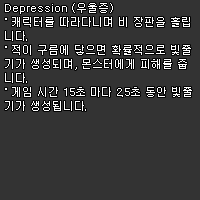
<style>
.page{position:relative;width:200px;height:200px;background:#333333}
.page>*{position:absolute;margin:0}
.t1{font:11px/14px "Dotum";color:#ffffff}
</style>
<div class="page">
<p class="t1" style="left:5px;top:3px;width:187px;height:108px">Depression (우울증)<br>˚ 캐릭터를 따라다니며 비 장판을 흘립<br>니다.<br>˚ 적이 구름에 닿으면 확률적으로 빛줄<br>기가 생성되며, 몬스터에게 피해를 줍<br>니다.<br>˚ 게임 시간 15초 마다 2.5초 동안 빛줄<br>기가 생성됩니다.</p>
</div>
